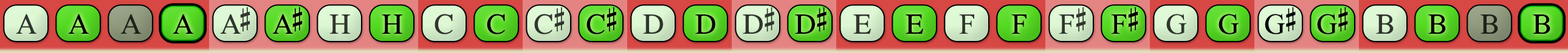
<style>
.page{position:relative;width:1568px;height:53px}
.page>*{position:absolute;margin:0}
.t1{font:29.2px "OpusChords";color:#2f352d}
.t2{font:29.2px "OpusChords";color:#000000}
.t3{font:29.2px "OpusChords";color:#1e211b}
.t4{font:29.2px "OpusChords";letter-spacing:-0.1em;color:#2f352d}
.t5{font:29.2px "OpusChords";letter-spacing:-0.1em;color:#000000}
.t6{font:29.2px "OpusChords";color:#30352d}
.t7{font:29.2px "OpusChords";color:#30362e}
.t8{font:29.2px "OpusChords";letter-spacing:-0.025em;color:#2f352d}
.t9{font:29.2px "OpusChords";letter-spacing:-0.025em;color:#000000}
.t10{font:29.2px "OpusChords";color:#1f211b}
</style>
<div class="page">
<p class="t1" style="left:16px;top:14px;width:20px;height:20px">A</p>
<p class="t2" style="left:68px;top:14px;width:21px;height:20px">A</p>
<p class="t3" style="left:120px;top:14px;width:21px;height:20px">A</p>
<p class="t2" style="left:173px;top:14px;width:20px;height:20px">A</p>
<p class="t4" style="left:220px;top:7px;width:30px;height:27px">A#</p>
<p class="t5" style="left:272px;top:7px;width:30px;height:27px">A#</p>
<p class="t6" style="left:329px;top:15px;width:21px;height:19px">H</p>
<p class="t2" style="left:382px;top:15px;width:20px;height:19px">H</p>
<p class="t7" style="left:435px;top:14px;width:18px;height:21px">C</p>
<p class="t2" style="left:487px;top:14px;width:18px;height:21px">C</p>
<p class="t1" style="left:534px;top:7px;width:30px;height:28px">C#</p>
<p class="t2" style="left:586px;top:7px;width:30px;height:28px">C#</p>
<p class="t1" style="left:643px;top:15px;width:20px;height:19px">D</p>
<p class="t2" style="left:695px;top:15px;width:20px;height:19px">D</p>
<p class="t8" style="left:743px;top:7px;width:31px;height:27px">D#</p>
<p class="t9" style="left:795px;top:7px;width:32px;height:27px">D#</p>
<p class="t7" style="left:853px;top:15px;width:18px;height:19px">E</p>
<p class="t2" style="left:906px;top:15px;width:17px;height:19px">E</p>
<p class="t7" style="left:959px;top:15px;width:15px;height:19px">F</p>
<p class="t2" style="left:1011px;top:15px;width:15px;height:19px">F</p>
<p class="t6" style="left:1059px;top:7px;width:27px;height:27px">F#</p>
<p class="t2" style="left:1111px;top:7px;width:27px;height:27px">F#</p>
<p class="t1" style="left:1166px;top:14px;width:20px;height:21px">G</p>
<p class="t2" style="left:1219px;top:14px;width:20px;height:21px">G</p>
<p class="t9" style="left:1265px;top:7px;width:31px;height:28px">G#</p>
<p class="t9" style="left:1317px;top:7px;width:31px;height:28px">G#</p>
<p class="t6" style="left:1376px;top:15px;width:18px;height:19px">B</p>
<p class="t2" style="left:1428px;top:15px;width:18px;height:19px">B</p>
<p class="t10" style="left:1480px;top:15px;width:18px;height:19px">B</p>
<p class="t2" style="left:1533px;top:15px;width:17px;height:19px">B</p>
</div>
